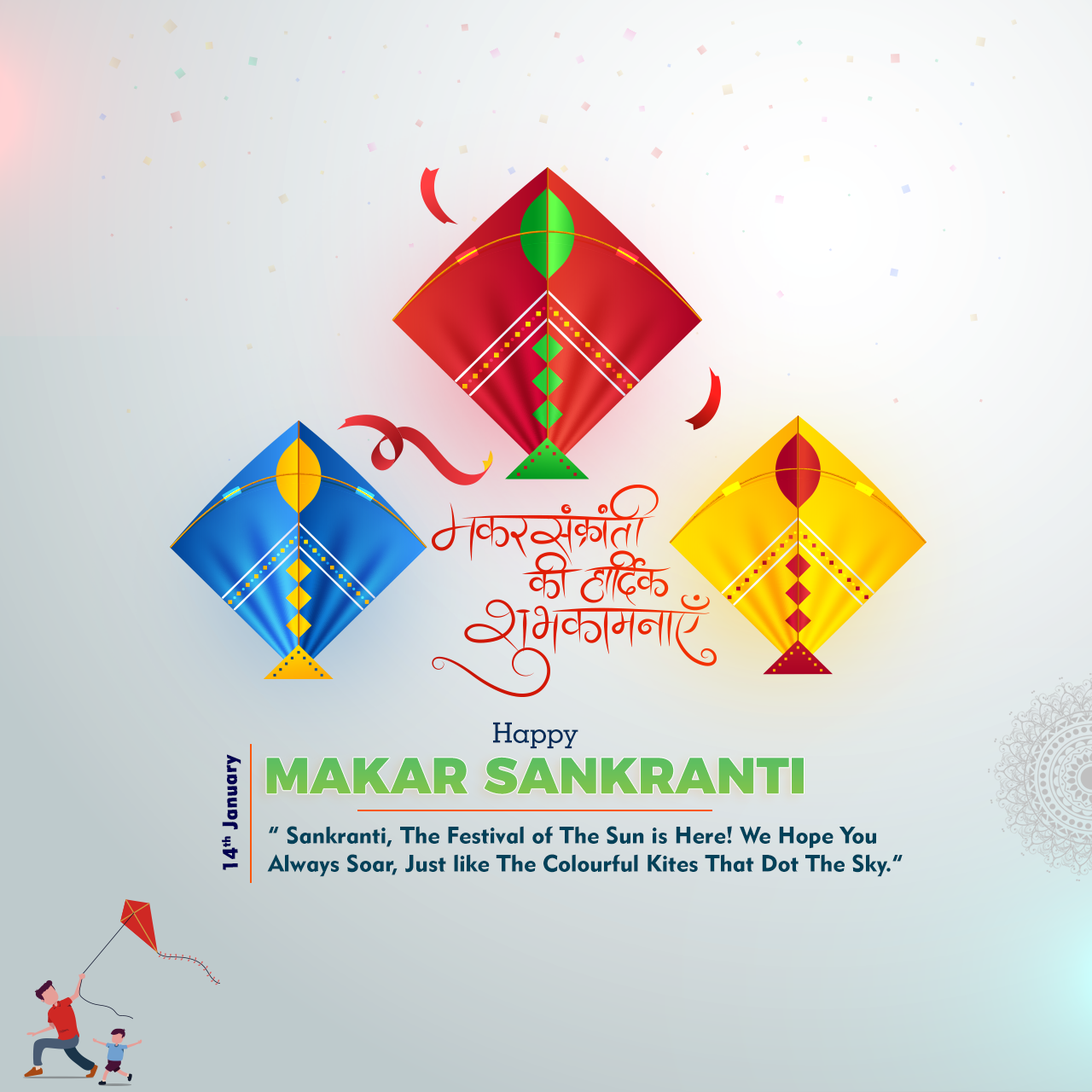
<style>
.page{position:relative;width:1092px;height:1092px}
.page>*{position:absolute;margin:0}
.t1{font:28.2px "GeometricSlab703BT-Medium";color:#002c59}
.t2{font:20.5px "Geometric415BT-BlackA";color:#020051;font-weight:bold}
.t3{font:51.2px "Montserrat-Black";color:#6fc156;text-transform:uppercase}
.t4{font:23.4px "Geometric415BT-BlackA";color:#004159}
</style>
<div class="page">
<p class="t1" style="left:493px;top:722px;width:85px;height:27px">Happy</p>
<p class="t2" style="left:222px;top:754px;width:19px;height:116px;rotate:-91deg">14th January</p>
<p class="t3" style="left:266px;top:757px;width:538px;height:37px">makar sankranti</p>
<p class="t4" style="left:267px;top:826px;width:636px;height:51px">“ Sankranti, The Festival of The Sun is Here! We Hope You <br>Always Soar, Just like The Colourful Kites That Dot The Sky.”</p>
</div>
